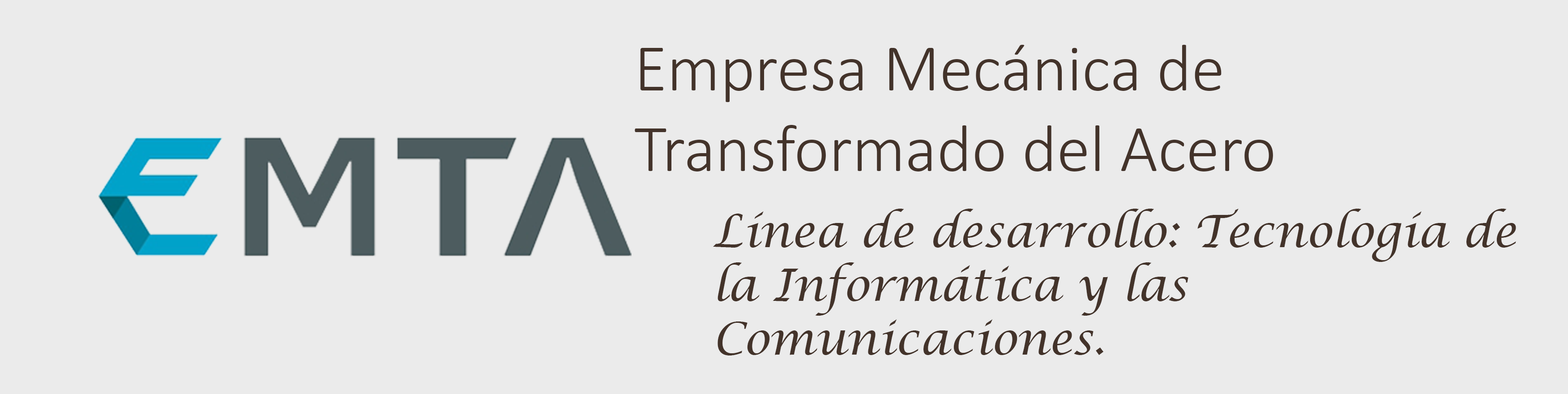
<style>
.page{position:relative;width:1568px;height:394px;background:#ebebeb}
.page>*{position:absolute;margin:0}
.t1{font:67.1px "Calibri-Light";color:#43332a}
.t2{font:44.8px "LucidaCalligraphy-Italic";color:#43332a}
</style>
<div class="page">
<p class="t1" style="left:635px;top:45px;width:638px;height:126px">Empresa Mecánica de Transformado del Acero</p>
<p class="t2" style="left:713px;top:209px;width:803px;height:146px">Línea de desarrollo: Tecnología de la Informática y las Comunicaciones.</p>
</div>
